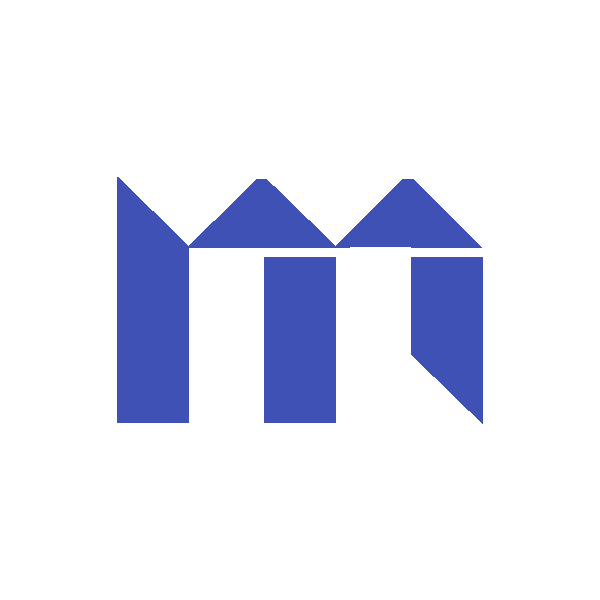
<style>
.page{position:relative;width:600px;height:600px;background:#ffffff}
.page>*{position:absolute;margin:0}
.t1{font:486.1px "Origram";color:#3f51b5}
</style>
<div class="page">
<p class="t1" style="left:117px;top:177px;width:366px;height:247px">M</p>
</div>
